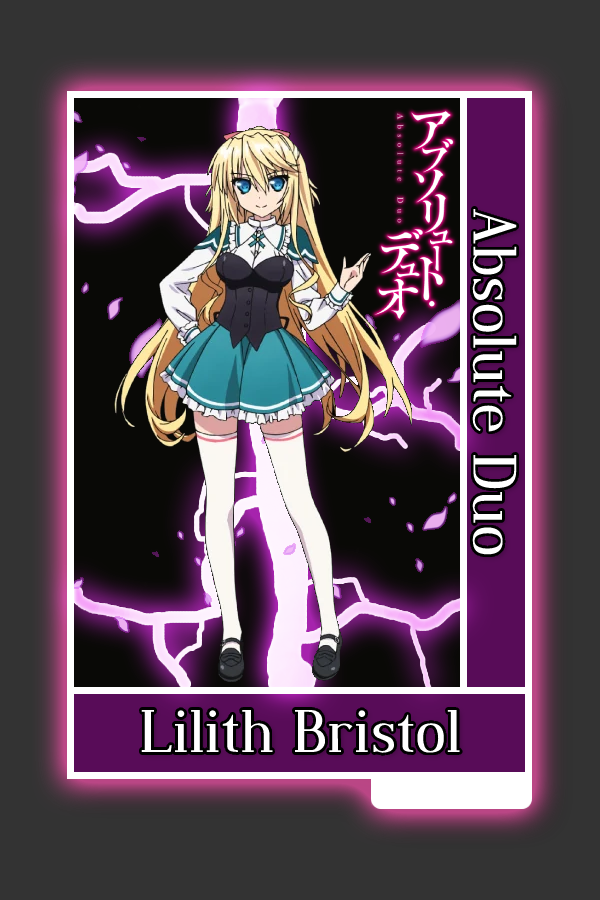
<style>
.page{position:relative;width:600px;height:900px;background:#333333}
.page>*{position:absolute;margin:0}
.t1{font:60px "DustismoRoman";color:#ffffff}
.t2{font:59px "DustismoRoman";color:#ffffff}
</style>
<div class="page">
<p class="t1" style="left:472px;top:208px;width:45px;height:347px;rotate:90deg">Absolute Duo</p>
<p class="t2" style="left:141px;top:709px;width:319px;height:44px">Lilith Bristol</p>
</div>
